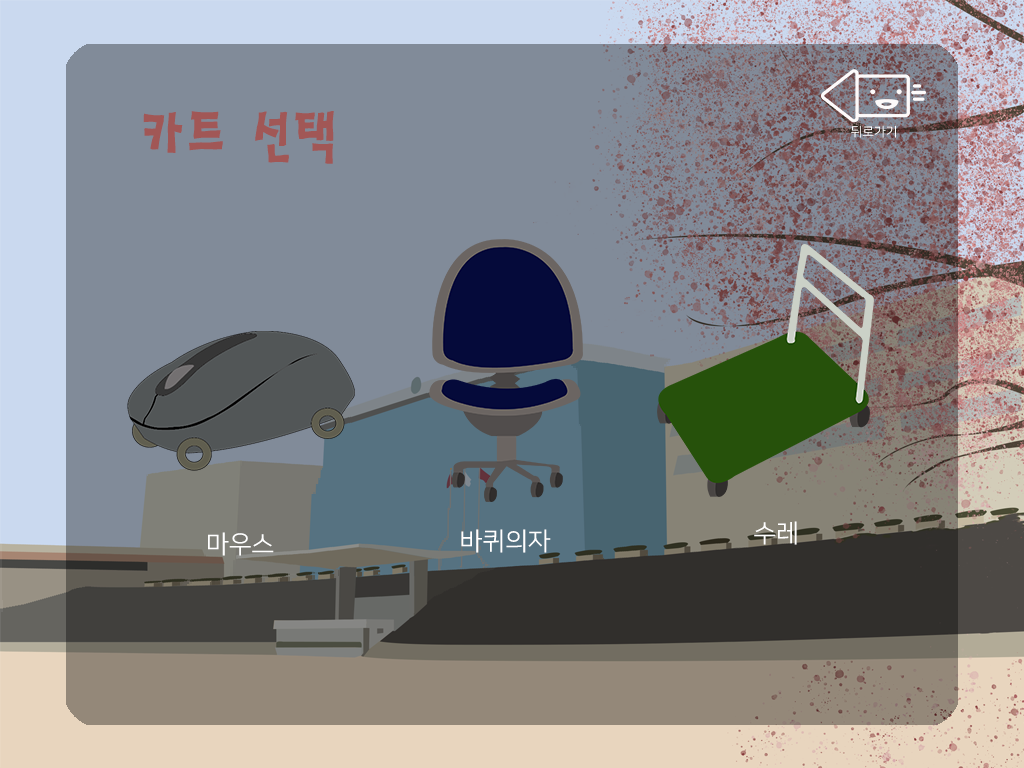
<style>
.page{position:relative;width:1024px;height:768px;background:#818b99}
.page>*{position:absolute;margin:0}
.t1{font:62.1px "HaanSaleB";color:#a15756;scale:0.9 1}
.t2{font:12.9px "NanumSquareOTFR";color:#ffffff}
.t3{font:25px "NanumSquareOTFR";color:#ffffff}
</style>
<div class="page">
<p class="t1" style="left:143px;top:111px;width:191px;height:53px">카트 선택</p>
<p class="t2" style="left:851px;top:125px;width:45px;height:13px">뒤로가기</p>
<p class="t3" style="left:754px;top:521px;width:43px;height:24px">수레</p>
<p class="t3" style="left:208px;top:532px;width:66px;height:24px">마우스</p>
<p class="t3" style="left:461px;top:529px;width:90px;height:24px">바퀴의자</p>
</div>
